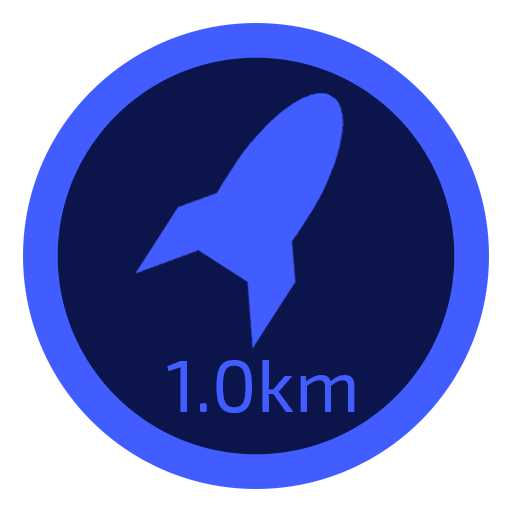
<style>
.page{position:relative;width:512px;height:512px;background:#0c154b}
.page>*{position:absolute;margin:0}
.t1{font:74.2px "Exo2-Regular";color:#425dff}
</style>
<div class="page">
<p class="t1" style="left:167px;top:360px;width:188px;height:53px">1.0km</p>
</div>
